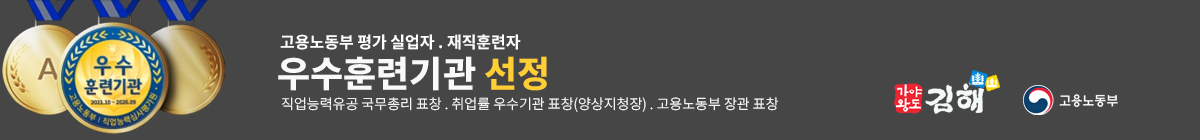
<style>
.page{position:relative;width:1200px;height:140px;background:#464646}
.page>*{position:absolute;margin:0}
.t1{font:16px "NotoSansKR-Bold";color:#fdfdfd}
.t2{font:36px "NotoSansKR-ExtraBold";color:#faf8f8}
.t3{font:36px "NotoSansKR-ExtraBold";color:#ffce34}
.t4{font:14px "NotoSansKR-Light";color:#fdfdfd}
</style>
<div class="page">
<p class="t1" style="left:280px;top:34px;width:241px;height:16px">고용노동부 평가 실업자 . 재직훈련자</p>
<p class="t2" style="left:278px;top:56px;width:269px;height:35px">우수훈련기관 <span class="t3">선정</span></p>
<p class="t4" style="left:282px;top:97px;width:497px;height:15px">직업능력유공 국무총리 표창 . 취업률 우수기관 표창(양상지청장) . 고용노동부 장관 표창</p>
</div>
